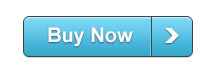
<style>
.page{position:relative;width:215px;height:77px;background:#ffffff}
.page>*{position:absolute;margin:0}
.t1{font:20px "Arial-BoldMT";color:#ffffff}
</style>
<div class="page">
<p class="t1" style="left:48px;top:27px;width:85px;height:20px">Buy Now</p>
</div>
